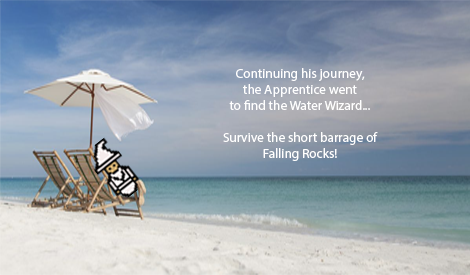
<style>
.page{position:relative;width:470px;height:275px}
.page>*{position:absolute;margin:0}
.t1{font:13.3px "MyriadPro-Regular";color:#ffffff}
</style>
<div class="page">
<p class="t1" style="left:223px;top:68px;width:155px;height:93px;text-align:center">Continuing his journey,<br>the Apprentice went<br>to find the Water Wizard...<br><br>Survive the short barrage of<br>Falling Rocks!</p>
</div>
